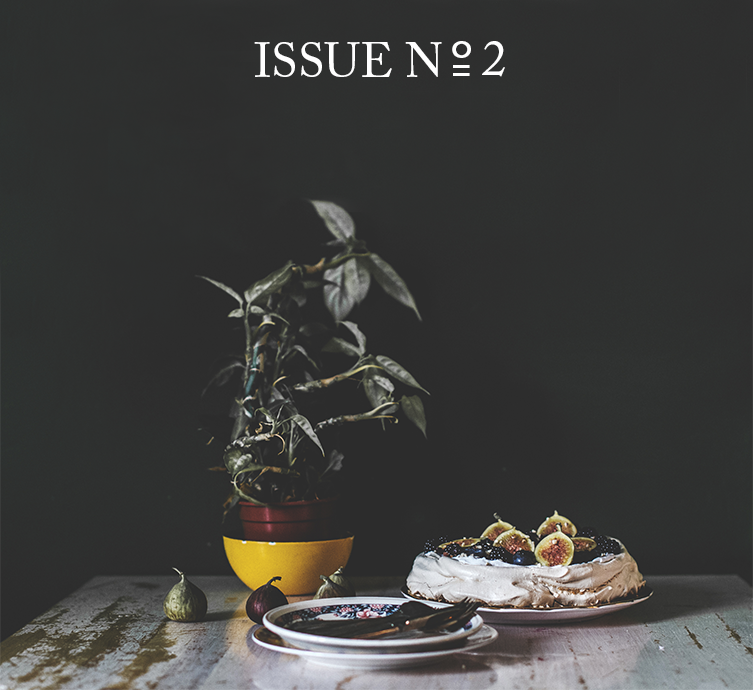
<style>
.page{position:relative;width:753px;height:690px}
.page>*{position:absolute;margin:0}
.t1{font:85px "ACaslonPro-Regular";color:#ffffff}
.t2{font:50px "ACaslonPro-Regular";color:#ffffff}
.t3{font:48px "ACaslonPro-Regular";color:#ffffff}
.t4{font:55px "ACaslonPro-Regular";color:#ffffff}
</style>
<div class="page">
<p class="t1" style="left:452px;top:41px;width:19px;height:17px">°</p>
<p class="t2" style="left:482px;top:41px;width:23px;height:36px">2</p>
<p class="t3" style="left:254px;top:42px;width:188px;height:35px">ISSUE N</p>
<p class="t4" style="left:453px;top:65px;width:17px;height:3px">-</p>
<p class="t4" style="left:453px;top:73px;width:17px;height:3px">-</p>
</div>
